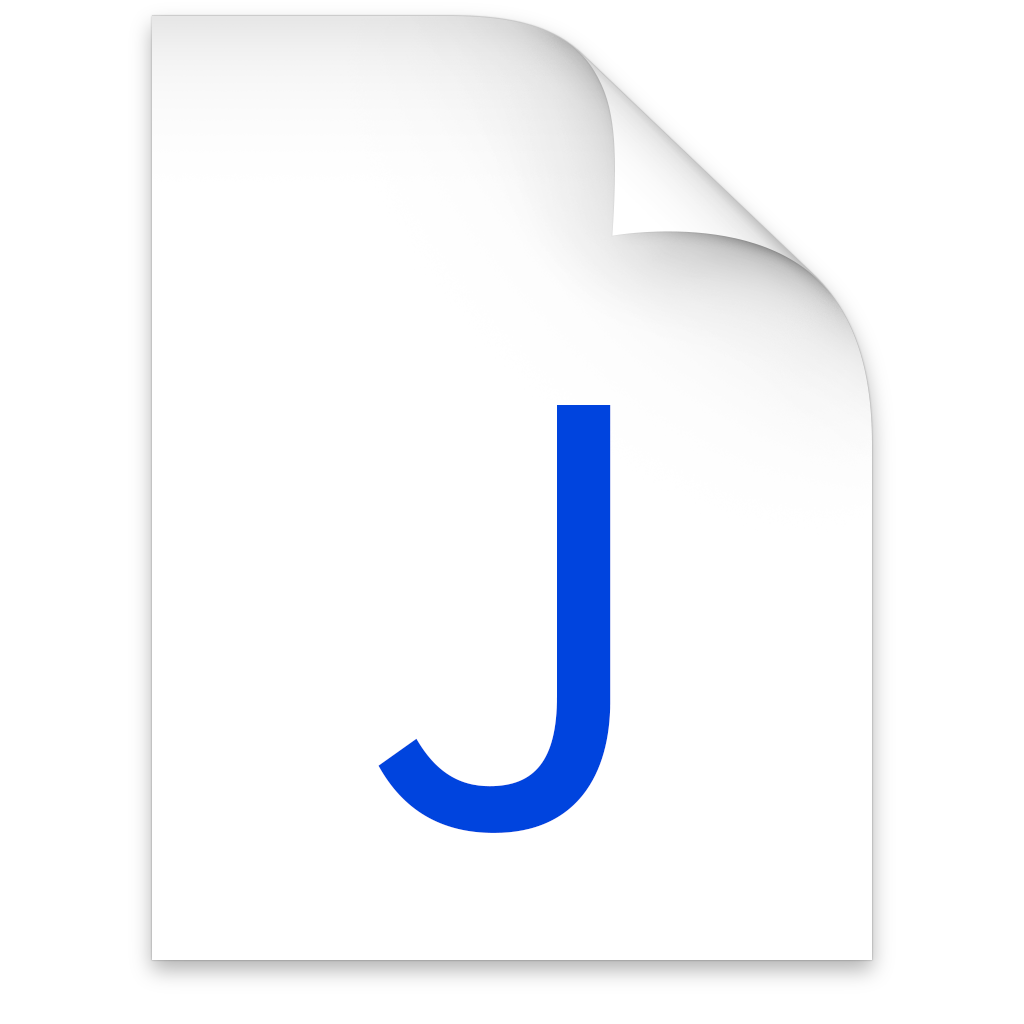
<style>
.page{position:relative;width:1024px;height:1024px;background:#ffffff}
.page>*{position:absolute;margin:0}
.t1{font:642px "SourceSansPro-Regular";color:#0044de}
</style>
<div class="page">
<p class="t1" style="left:378px;top:405px;width:233px;height:428px">J</p>
</div>
